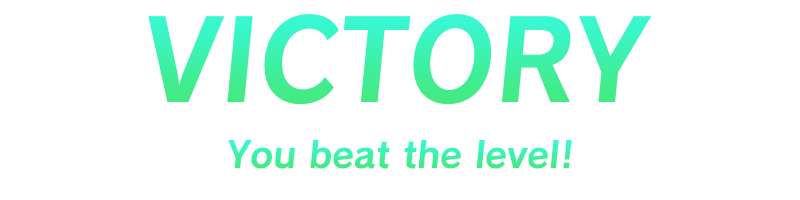
<style>
.page{position:relative;width:800px;height:200px;background:#ffffff}
.page>*{position:absolute;margin:0}
.t1{font:110px "Calamity-Bold"}
.t2{font:36px "Calamity-Bold"}
</style>
<div class="page">
<p class="t1" style="left:148px;top:14px;width:504px;height:91px">VICTORY</p>
<p class="t2" style="left:228px;top:139px;width:344px;height:30px">You beat the level!</p>
</div>
